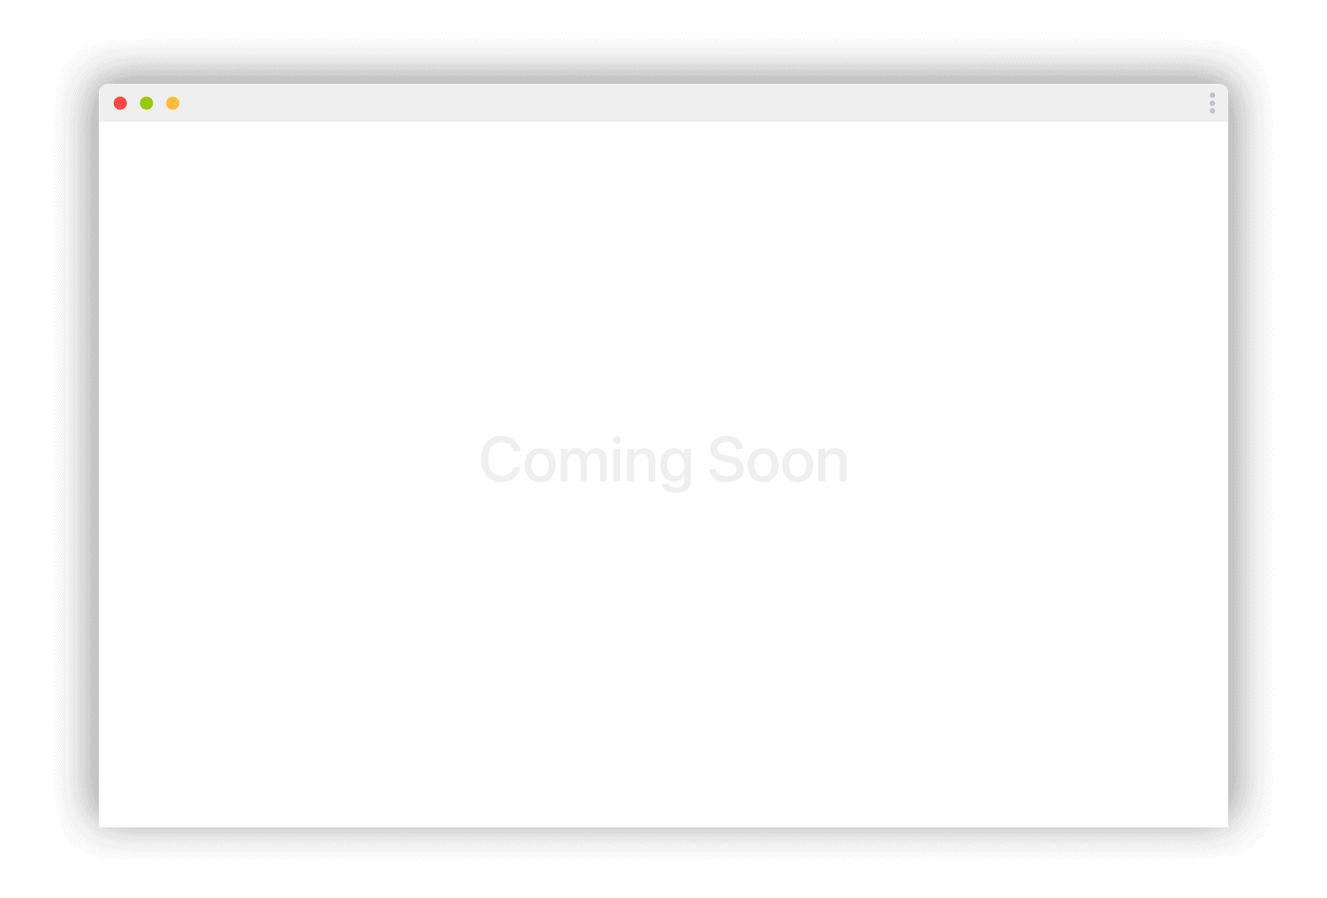
<style>
.page{position:relative;width:1327px;height:898px;background:#ffffff}
.page>*{position:absolute;margin:0}
.t1{font:63.5px "SFPro-Medium";color:#efefef}
</style>
<div class="page">
<p class="t1" style="left:481px;top:436px;width:366px;height:57px">Coming Soon</p>
</div>
